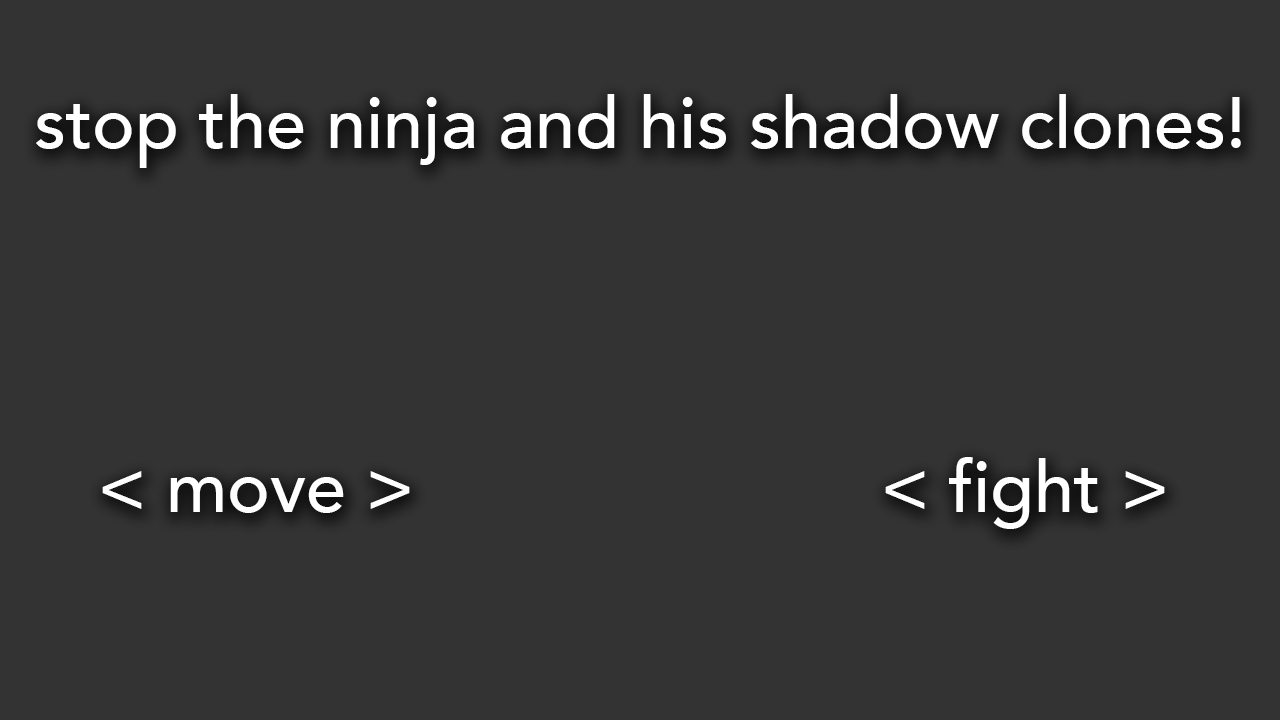
<style>
.page{position:relative;width:1280px;height:720px;background:#333333}
.page>*{position:absolute;margin:0}
.t1{font:72px "Avenir-Medium";color:#ffffff}
</style>
<div class="page">
<p class="t1" style="left:36px;top:94px;width:1205px;height:74px">stop the ninja and his shadow clones!</p>
<p class="t1" style="left:885px;top:457px;width:280px;height:72px">&lt; fight &gt;</p>
<p class="t1" style="left:102px;top:471px;width:308px;height:42px">&lt; move &gt;</p>
</div>
